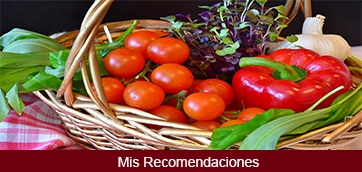
<style>
.page{position:relative;width:362px;height:172px}
.page>*{position:absolute;margin:0}
.t1{font:14px "ArialMT";color:#f9f8f8}
</style>
<div class="page">
<p class="t1" style="left:118px;top:157px;width:141px;height:10px">Mis Recomendaciones</p>
</div>
